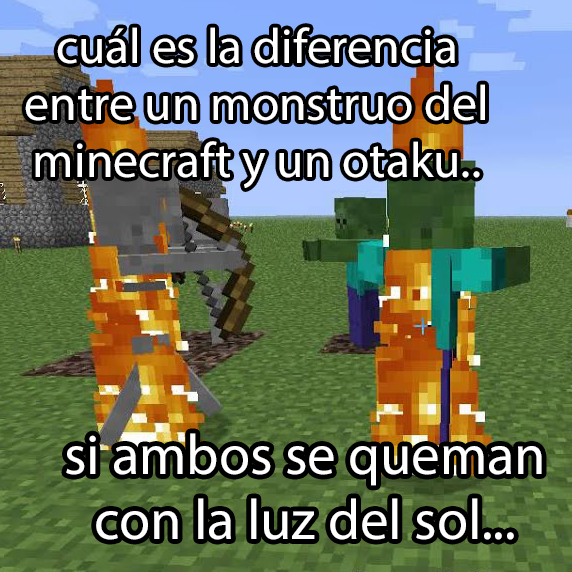
<style>
.page{position:relative;width:572px;height:572px}
.page>*{position:absolute;margin:0}
.t1{font:49.7px "MyriadPro-Regular";color:#ffffff}
.t2{font:56.9px "MyriadPro-Regular";color:#ffffff}
</style>
<div class="page">
<p class="t1" style="left:25px;top:27px;width:460px;height:161px;text-align:center">cuál es la diferencia<br>entre un monstruo del<br>minecraft y un otaku..</p>
<p class="t2" style="left:66px;top:433px;width:476px;height:107px;text-align:center">si ambos se queman<br>con la luz del sol...</p>
</div>
